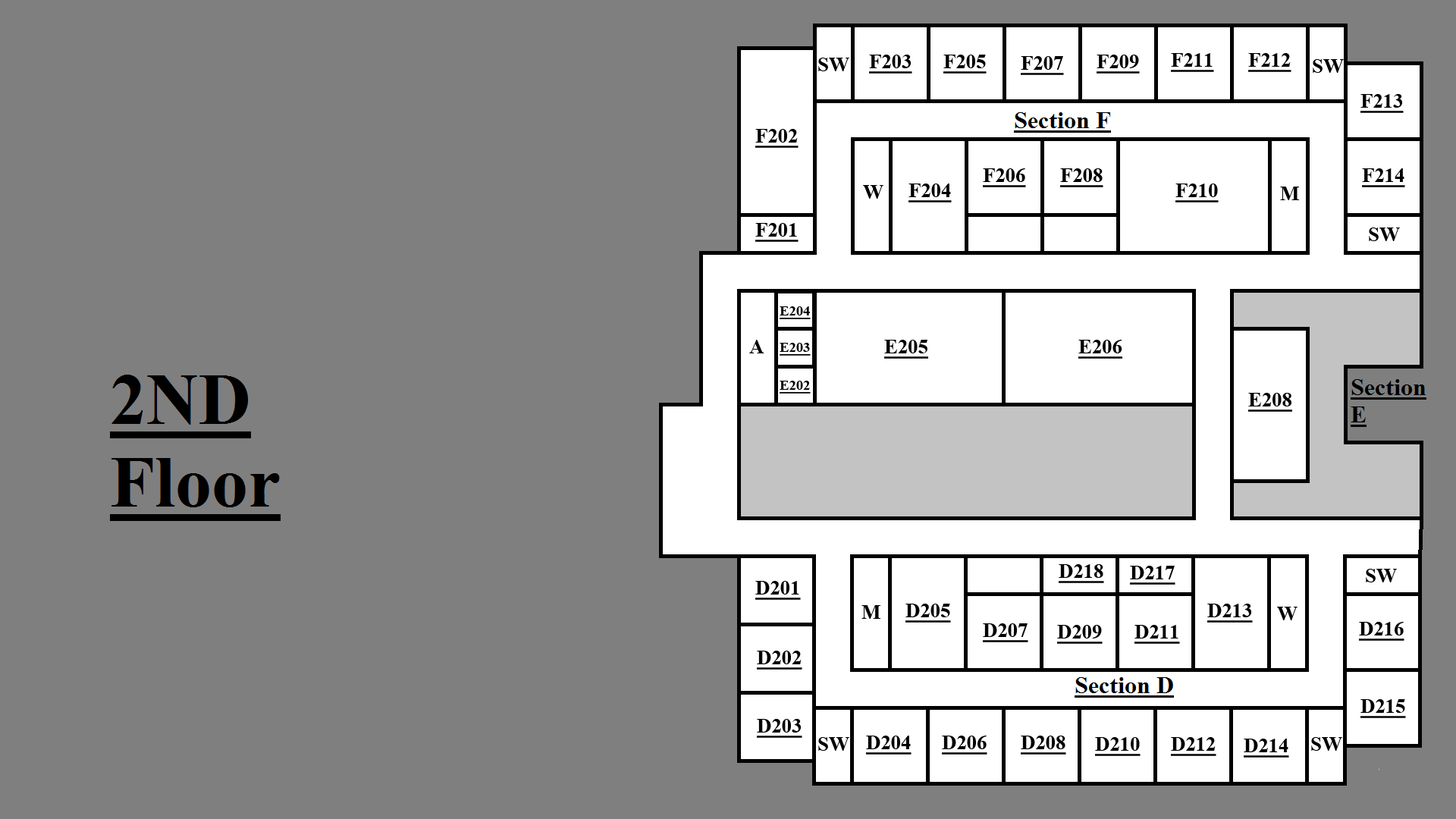
<style>
.page{position:relative;width:1456px;height:819px;background:#7f7f7f}
.page>*{position:absolute;margin:0}
.t1{font:20.2px "TimesNewRomanPS-BoldMT";color:#000000;text-decoration:underline}
.t2{font:20.2px "TimesNewRomanPS-BoldMT";color:#000000}
.t3{font:14.2px "TimesNewRomanPS-BoldMT";color:#000000;text-decoration:underline}
</style>
<div class="page">
<p class="t1" style="left:1171px;top:53px;width:43px;height:19px">F211</p>
<p class="t1" style="left:1248px;top:53px;width:43px;height:19px">F212</p>
<p class="t2" style="left:818px;top:58px;width:31px;height:13px">SW</p>
<p class="t1" style="left:869px;top:55px;width:43px;height:19px">F203</p>
<p class="t1" style="left:943px;top:55px;width:44px;height:19px">F205</p>
<p class="t1" style="left:1021px;top:56px;width:43px;height:19px">F207</p>
<p class="t1" style="left:1097px;top:55px;width:43px;height:19px">F209</p>
<p class="t2" style="left:1313px;top:59px;width:31px;height:14px">SW</p>
<p class="t1" style="left:1360px;top:94px;width:44px;height:19px">F213</p>
<p class="t1" style="left:755px;top:129px;width:44px;height:19px">F202</p>
<p class="t1" style="left:983px;top:168px;width:43px;height:19px">F206</p>
<p class="t1" style="left:1060px;top:168px;width:43px;height:19px">F208</p>
<p class="t1" style="left:1362px;top:168px;width:43px;height:19px">F214</p>
<p class="t2" style="left:863px;top:185px;width:20px;height:14px">W</p>
<p class="t1" style="left:908px;top:184px;width:44px;height:18px">F204</p>
<p class="t1" style="left:1175px;top:184px;width:44px;height:18px">F210</p>
<p class="t2" style="left:1280px;top:187px;width:19px;height:13px">M</p>
<p class="t1" style="left:755px;top:223px;width:44px;height:19px">F201</p>
<p class="t2" style="left:1369px;top:227px;width:31px;height:14px">SW</p>
<p class="t3" style="left:780px;top:306px;width:31px;height:13px">E204</p>
<p class="t2" style="left:749px;top:340px;width:15px;height:13px">A</p>
<p class="t1" style="left:884px;top:340px;width:44px;height:19px">E205</p>
<p class="t1" style="left:1078px;top:340px;width:44px;height:19px">E206</p>
<p class="t3" style="left:780px;top:343px;width:31px;height:13px">E203</p>
<p class="t3" style="left:780px;top:381px;width:31px;height:13px">E202</p>
<p class="t1" style="left:1248px;top:393px;width:44px;height:19px">E208</p>
<p class="t1" style="left:1059px;top:564px;width:45px;height:19px">D218</p>
<p class="t1" style="left:1130px;top:566px;width:45px;height:19px">D217</p>
<p class="t2" style="left:1366px;top:569px;width:31px;height:13px">SW</p>
<p class="t1" style="left:755px;top:581px;width:46px;height:19px">D201</p>
<p class="t2" style="left:861px;top:605px;width:19px;height:14px">M</p>
<p class="t1" style="left:905px;top:604px;width:46px;height:19px">D205</p>
<p class="t1" style="left:1207px;top:604px;width:46px;height:19px">D213</p>
<p class="t2" style="left:1277px;top:607px;width:20px;height:13px">W</p>
<p class="t1" style="left:983px;top:623px;width:45px;height:19px">D207</p>
<p class="t1" style="left:1057px;top:625px;width:46px;height:19px">D209</p>
<p class="t1" style="left:1134px;top:625px;width:46px;height:19px">D211</p>
<p class="t1" style="left:1359px;top:622px;width:45px;height:19px">D216</p>
<p class="t1" style="left:757px;top:651px;width:45px;height:19px">D202</p>
<p class="t1" style="left:1360px;top:699px;width:46px;height:19px">D215</p>
<p class="t1" style="left:757px;top:719px;width:45px;height:19px">D203</p>
<p class="t2" style="left:818px;top:737px;width:31px;height:14px">SW</p>
<p class="t1" style="left:866px;top:736px;width:46px;height:19px">D204</p>
<p class="t1" style="left:942px;top:736px;width:45px;height:19px">D206</p>
<p class="t1" style="left:1021px;top:736px;width:45px;height:19px">D208</p>
<p class="t1" style="left:1095px;top:737px;width:46px;height:19px">D210</p>
<p class="t1" style="left:1171px;top:737px;width:45px;height:19px">D212</p>
<p class="t2" style="left:1311px;top:737px;width:31px;height:14px">SW</p>
<p class="t1" style="left:1244px;top:739px;width:45px;height:19px">D214</p>
</div>
